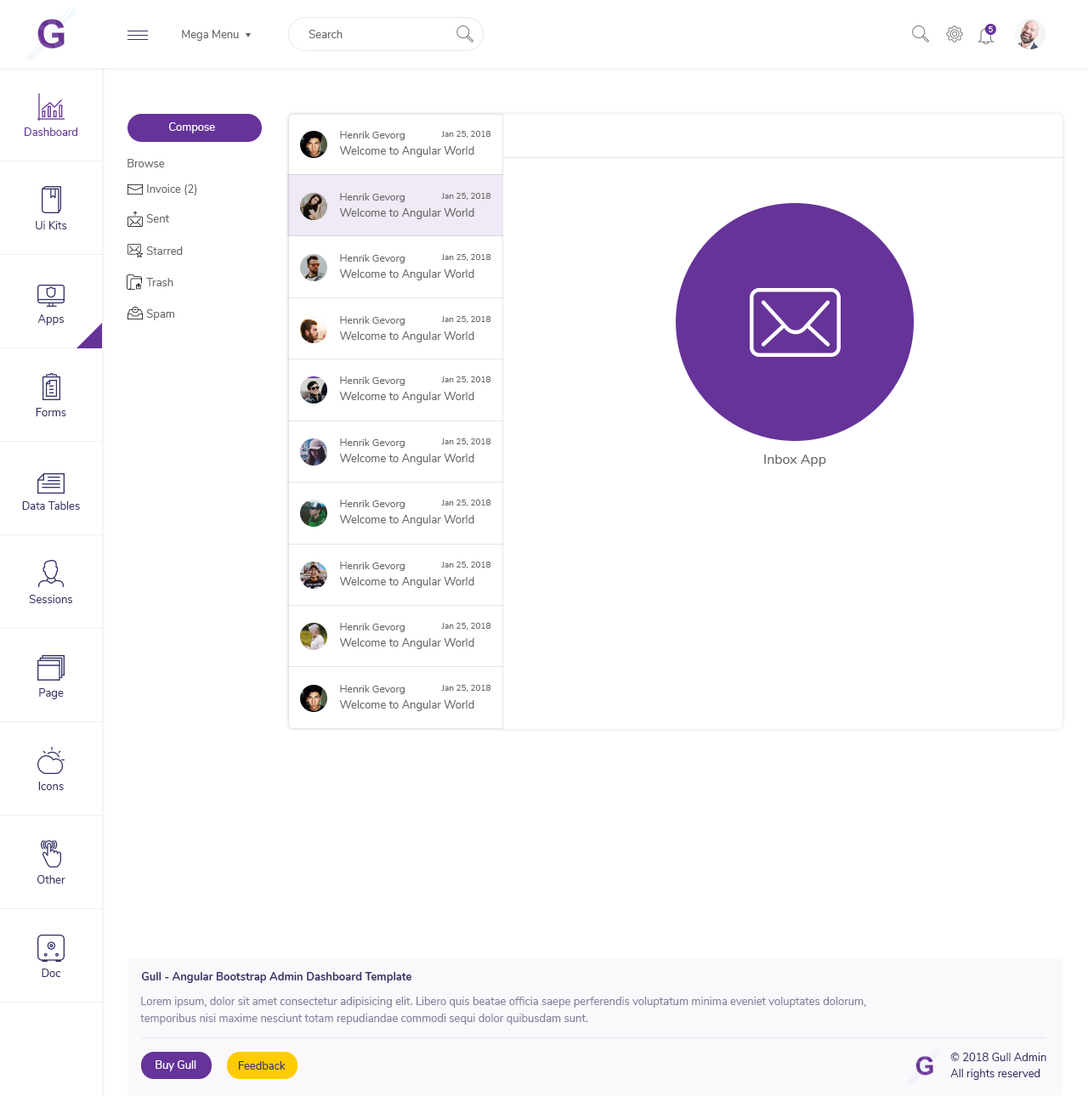
<style>
.page{position:relative;width:1088px;height:1096px;background:#ffffff}
.page>*{position:absolute;margin:0}
.t1{font:11px "Nunito-Regular";color:#666666}
.t2{font:7.6px "Nunito-SemiBold";color:#ffffff}
.t3{font:11px "Nunito-Regular";color:#ffffff}
.t4{font:11px "Nunito-Regular";color:#663399}
.t5{font:10.2px "Nunito-Regular";color:#666666}
.t6{font:8.5px "Nunito-Regular";color:#666666}
.t7{font:11px "Nunito-Regular";color:#333366}
.t8{font:13.6px "Nunito-Regular";color:#666666}
.t9{font:11px "Nunito-Bold";color:#333366}
.t10{font:11px/17px "Nunito-Regular";color:#82819b}
</style>
<div class="page">
<p class="t1" style="left:182px;top:30px;width:57px;height:11px">Mega Menu</p>
<p class="t1" style="left:308px;top:30px;width:34px;height:8px">Search</p>
<p class="t2" style="left:988px;top:26px;width:5px;height:6px">5</p>
<p class="t3" style="left:168px;top:122px;width:47px;height:11px">Compose</p>
<p class="t4" style="left:25px;top:127px;width:52px;height:9px">Dashboard</p>
<p class="t5" style="left:340px;top:131px;width:65px;height:9px">Henrik Gevorg</p>
<p class="t6" style="left:441px;top:131px;width:50px;height:7px">Jan 25, 2018</p>
<p class="t1" style="left:339px;top:146px;width:135px;height:11px">Welcome to Angular World</p>
<p class="t1" style="left:127px;top:159px;width:38px;height:8px">Browse</p>
<p class="t1" style="left:147px;top:184px;width:50px;height:11px">Invoice (2)</p>
<p class="t5" style="left:340px;top:193px;width:65px;height:9px">Henrik Gevorg</p>
<p class="t6" style="left:441px;top:193px;width:50px;height:7px">Jan 25, 2018</p>
<p class="t1" style="left:339px;top:208px;width:135px;height:11px">Welcome to Angular World</p>
<p class="t7" style="left:36px;top:221px;width:31px;height:8px">Ui Kits</p>
<p class="t1" style="left:146px;top:214px;width:23px;height:9px">Sent</p>
<p class="t1" style="left:146px;top:246px;width:37px;height:9px">Starred</p>
<p class="t5" style="left:340px;top:254px;width:65px;height:9px">Henrik Gevorg</p>
<p class="t6" style="left:441px;top:254px;width:50px;height:7px">Jan 25, 2018</p>
<p class="t1" style="left:339px;top:269px;width:135px;height:11px">Welcome to Angular World</p>
<p class="t1" style="left:146px;top:278px;width:27px;height:8px">Trash</p>
<p class="t7" style="left:37px;top:314px;width:27px;height:11px">Apps</p>
<p class="t1" style="left:146px;top:309px;width:28px;height:11px">Spam</p>
<p class="t5" style="left:340px;top:316px;width:65px;height:9px">Henrik Gevorg</p>
<p class="t6" style="left:441px;top:316px;width:50px;height:7px">Jan 25, 2018</p>
<p class="t1" style="left:339px;top:331px;width:135px;height:11px">Welcome to Angular World</p>
<p class="t5" style="left:340px;top:376px;width:65px;height:10px">Henrik Gevorg</p>
<p class="t6" style="left:441px;top:376px;width:50px;height:7px">Jan 25, 2018</p>
<p class="t1" style="left:339px;top:392px;width:135px;height:11px">Welcome to Angular World</p>
<p class="t7" style="left:36px;top:408px;width:30px;height:8px">Forms</p>
<p class="t5" style="left:340px;top:438px;width:65px;height:10px">Henrik Gevorg</p>
<p class="t6" style="left:441px;top:438px;width:50px;height:7px">Jan 25, 2018</p>
<p class="t1" style="left:339px;top:454px;width:135px;height:11px">Welcome to Angular World</p>
<p class="t8" style="left:764px;top:455px;width:62px;height:12px">Inbox App</p>
<p class="t7" style="left:22px;top:501px;width:58px;height:9px">Data Tables</p>
<p class="t5" style="left:340px;top:500px;width:65px;height:9px">Henrik Gevorg</p>
<p class="t6" style="left:441px;top:500px;width:50px;height:6px">Jan 25, 2018</p>
<p class="t1" style="left:339px;top:515px;width:135px;height:11px">Welcome to Angular World</p>
<p class="t5" style="left:340px;top:562px;width:65px;height:9px">Henrik Gevorg</p>
<p class="t6" style="left:441px;top:562px;width:50px;height:7px">Jan 25, 2018</p>
<p class="t1" style="left:339px;top:577px;width:135px;height:11px">Welcome to Angular World</p>
<p class="t7" style="left:29px;top:595px;width:43px;height:8px">Sessions</p>
<p class="t5" style="left:340px;top:623px;width:65px;height:9px">Henrik Gevorg</p>
<p class="t6" style="left:441px;top:623px;width:50px;height:7px">Jan 25, 2018</p>
<p class="t1" style="left:339px;top:638px;width:135px;height:11px">Welcome to Angular World</p>
<p class="t7" style="left:39px;top:688px;width:25px;height:11px">Page</p>
<p class="t5" style="left:340px;top:685px;width:65px;height:9px">Henrik Gevorg</p>
<p class="t6" style="left:441px;top:685px;width:50px;height:7px">Jan 25, 2018</p>
<p class="t1" style="left:339px;top:700px;width:135px;height:11px">Welcome to Angular World</p>
<p class="t7" style="left:38px;top:782px;width:26px;height:8px">Icons</p>
<p class="t7" style="left:37px;top:875px;width:28px;height:9px">Other</p>
<p class="t7" style="left:42px;top:969px;width:19px;height:8px">Doc</p>
<p class="t9" style="left:141px;top:972px;width:270px;height:11px">Gull - Angular Bootstrap Admin Dashboard Template</p>
<p class="t10" style="left:140px;top:997px;width:726px;height:28px">Lorem ipsum, dolor sit amet consectetur adipisicing elit. Libero quis beatae officia saepe perferendis voluptatum minima eveniet voluptates dolorum, <br>temporibus nisi maxime nesciunt totam repudiandae commodi sequi dolor quibusdam sunt.</p>
<p class="t3" style="left:156px;top:1061px;width:40px;height:11px">Buy Gull</p>
<p class="t7" style="left:239px;top:1061px;width:47px;height:9px">Feedback</p>
<p class="t7" style="left:950px;top:1053px;width:96px;height:8px">© 2018 Gull Admin</p>
<p class="t7" style="left:950px;top:1069px;width:90px;height:11px">All rights reserved</p>
</div>
